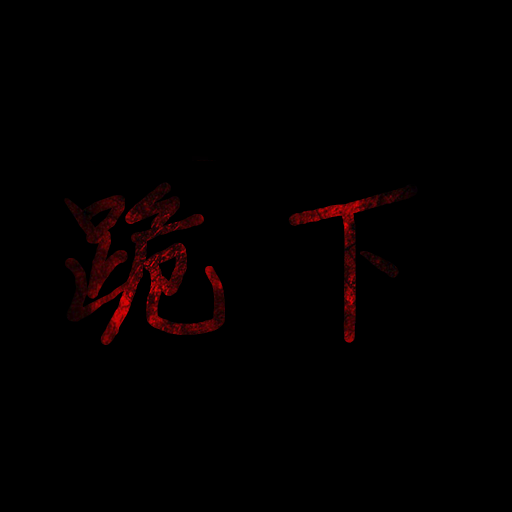
<style>
.page{position:relative;width:512px;height:512px;background:#000000}
.page>*{position:absolute;margin:0}
.t1{font:211.7px "ShouShuti"}
</style>
<div class="page">
<p class="t1" style="left:64px;top:182px;width:354px;height:163px">跪下</p>
</div>
